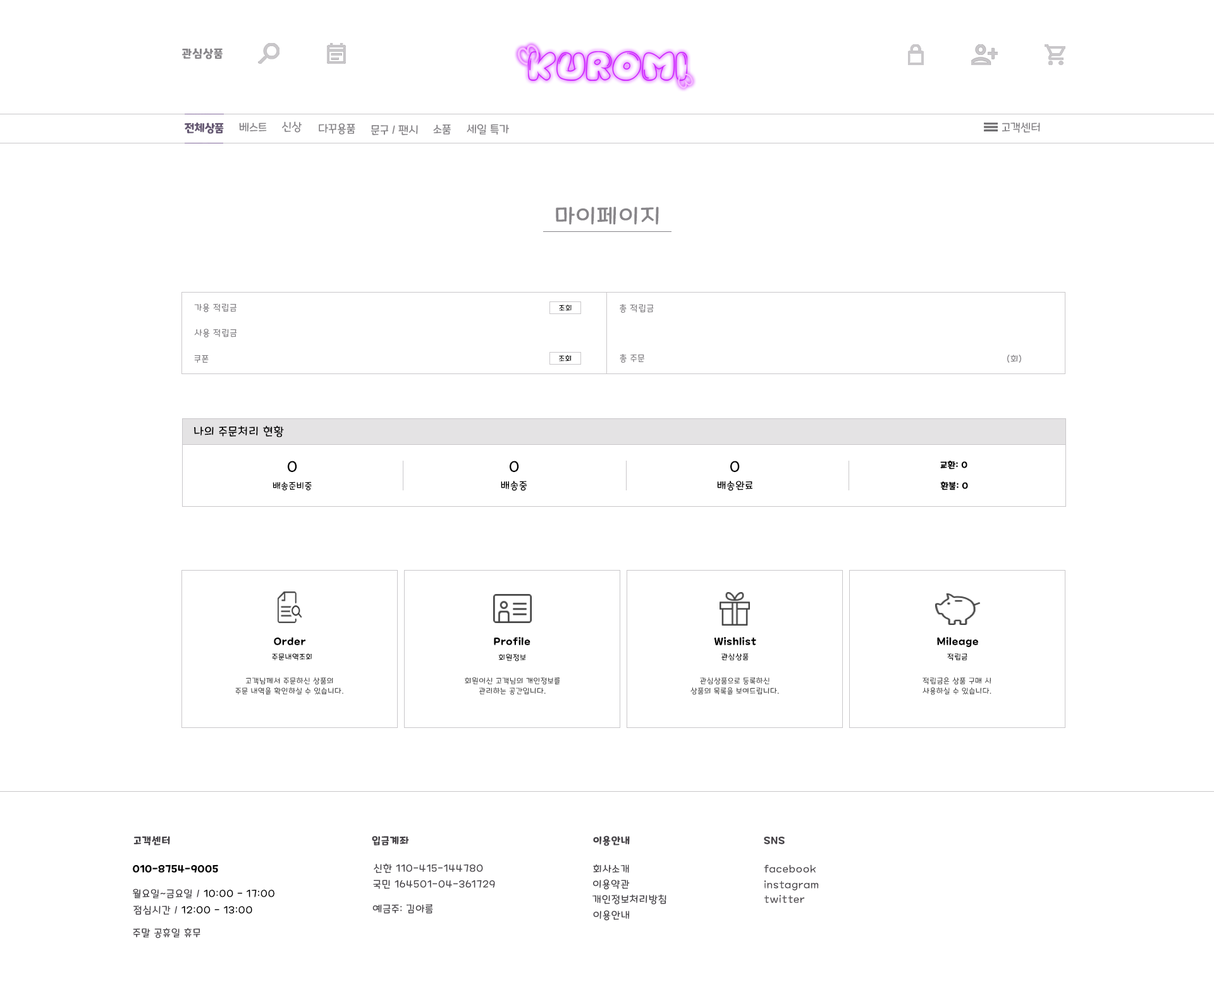
<style>
.page{position:relative;width:1214px;height:982px;background:#ffffff}
.page>*{position:absolute;margin:0}
.t1{font:11.4px "MaplestoryBold";letter-spacing:0.06em;color:#878589}
.t2{font:11.4px "MaplestoryBold";color:#645772}
.t3{font:11.4px "MaplestoryLight";color:#878589}
.t4{font:22.8px "MaplestoryLight";letter-spacing:0.06em;color:#878589}
.t5{font:8.9px "MaplestoryLight";letter-spacing:0.06em;color:#878589}
.t6{font:7.6px "MaplestoryLight";letter-spacing:0.06em;color:#000000}
.t7{font:11.4px "MaplestoryLight";letter-spacing:0.06em;color:#010101}
.t8{font:15.2px "MaplestoryLight";letter-spacing:0.06em;color:#010101}
.t9{font:8.9px "MaplestoryBold";letter-spacing:0.06em;color:#000000}
.t10{font:8.9px "MaplestoryLight";letter-spacing:0.06em;color:#010101}
.t11{font:10.1px "MaplestoryLight";letter-spacing:0.06em;color:#010101}
.t12{font:10.1px "MaplestoryBold";letter-spacing:0.06em;color:#000000}
.t13{font:7.6px/10.1px "MaplestoryLight";letter-spacing:0.06em;color:#4d4d4d}
.t14{font:10.1px "MaplestoryBold";letter-spacing:0.06em;color:#464348}
.t15{font:10.1px "MaplestoryLight";letter-spacing:0.06em;color:#464348}
.t16{font:10.1px "MaplestoryLight";letter-spacing:0.06em;color:#000000}
</style>
<div class="page">
<p class="t1" style="left:182px;top:48px;width:41px;height:11px">관심상품</p>
<p class="t2" style="left:185px;top:123px;width:39px;height:11px">전체상품</p>
<p class="t3" style="left:239px;top:123px;width:28px;height:9px">베스트</p>
<p class="t3" style="left:282px;top:121px;width:20px;height:12px">신상</p>
<p class="t3" style="left:319px;top:123px;width:36px;height:12px">다꾸용품</p>
<p class="t3" style="left:371px;top:125px;width:47px;height:10px">문구 / 팬시</p>
<p class="t3" style="left:433px;top:125px;width:18px;height:10px">소품</p>
<p class="t3" style="left:467px;top:124px;width:42px;height:11px">세일 특가</p>
<p class="t3" style="left:1002px;top:123px;width:38px;height:10px">고객센터</p>
<p class="t4" style="left:556px;top:207px;width:103px;height:18px">마이페이지</p>
<p class="t5" style="left:194px;top:303px;width:42px;height:9px">가용 적립금</p>
<p class="t6" style="left:559px;top:305px;width:12px;height:6px">조회</p>
<p class="t5" style="left:620px;top:304px;width:34px;height:9px">총 적립금</p>
<p class="t5" style="left:194px;top:329px;width:43px;height:9px">사용 적립금</p>
<p class="t5" style="left:194px;top:355px;width:15px;height:8px">쿠폰</p>
<p class="t6" style="left:559px;top:355px;width:12px;height:7px">조회</p>
<p class="t5" style="left:620px;top:354px;width:24px;height:9px">총 주문</p>
<p class="t5" style="left:1007px;top:355px;width:14px;height:8px">(회)</p>
<p class="t7" style="left:194px;top:425px;width:90px;height:12px">나의 주문처리 현황</p>
<p class="t8" style="left:288px;top:461px;width:9px;height:11px">0</p>
<p class="t8" style="left:510px;top:461px;width:9px;height:11px">0</p>
<p class="t8" style="left:730px;top:461px;width:10px;height:11px">0</p>
<p class="t9" style="left:940px;top:461px;width:27px;height:9px">교환: 0</p>
<p class="t10" style="left:272px;top:482px;width:40px;height:9px">배송준비중</p>
<p class="t11" style="left:501px;top:481px;width:26px;height:10px">배송중</p>
<p class="t11" style="left:717px;top:481px;width:35px;height:10px">배송완료</p>
<p class="t9" style="left:940px;top:482px;width:28px;height:9px">환불: 0</p>
<p class="t12" style="left:274px;top:637px;width:32px;height:8px">Order</p>
<p class="t12" style="left:494px;top:637px;width:36px;height:8px">Profile</p>
<p class="t12" style="left:714px;top:637px;width:42px;height:8px">Wishlist</p>
<p class="t12" style="left:937px;top:637px;width:41px;height:10px">Mileage</p>
<p class="t6" style="left:272px;top:654px;width:40px;height:7px">주문내역조회</p>
<p class="t6" style="left:498px;top:654px;width:27px;height:8px">회원정보</p>
<p class="t6" style="left:721px;top:654px;width:28px;height:7px">관심상품</p>
<p class="t6" style="left:947px;top:654px;width:20px;height:7px">적립금</p>
<p class="t13" style="left:235px;top:677px;width:108px;height:18px;text-align:center">고객님께서 주문하신 상품의<br>주문 내역을 확인하실 수 있습니다.</p>
<p class="t13" style="left:465px;top:677px;width:95px;height:18px;text-align:center">회원이신 고객님의 개인정보를<br>관리하는 공간입니다.</p>
<p class="t13" style="left:690px;top:677px;width:89px;height:18px;text-align:center">관심상품으로 등록하신<br>상품의 목록을 보여드립니다.</p>
<p class="t13" style="left:922px;top:678px;width:69px;height:17px;text-align:center">적립금은 상품 구매 시<br>사용하실 수 있습니다.</p>
<p class="t14" style="left:133px;top:836px;width:37px;height:10px">고객센터</p>
<p class="t14" style="left:372px;top:836px;width:37px;height:10px">입금계좌</p>
<p class="t14" style="left:593px;top:836px;width:37px;height:10px">이용안내</p>
<p class="t14" style="left:764px;top:837px;width:21px;height:8px">SNS</p>
<p class="t12" style="left:133px;top:865px;width:85px;height:8px">010-8754-9005</p>
<p class="t15" style="left:374px;top:864px;width:109px;height:10px">신한 110-415-144780</p>
<p class="t15" style="left:593px;top:865px;width:36px;height:8px">회사소개</p>
<p class="t15" style="left:764px;top:865px;width:52px;height:8px">facebook</p>
<p class="t15" style="left:373px;top:880px;width:122px;height:9px">국민 164501-04-361729</p>
<p class="t15" style="left:593px;top:879px;width:37px;height:11px">이용약관</p>
<p class="t15" style="left:764px;top:881px;width:55px;height:10px">instagram</p>
<p class="t16" style="left:133px;top:889px;width:141px;height:10px"><span class="t15">월요일~금요일 / </span>10:00 - 17:00</p>
<p class="t16" style="left:133px;top:906px;width:119px;height:9px"><span class="t15">점심시간 / </span>12:00 - 13:00</p>
<p class="t15" style="left:372px;top:905px;width:61px;height:9px">예금주: 김아름</p>
<p class="t15" style="left:592px;top:895px;width:74px;height:10px">개인정보처리방침</p>
<p class="t15" style="left:764px;top:895px;width:41px;height:8px">twitter</p>
<p class="t15" style="left:593px;top:910px;width:36px;height:11px">이용안내</p>
<p class="t15" style="left:133px;top:928px;width:67px;height:11px">주말 공휴일 휴무</p>
</div>
